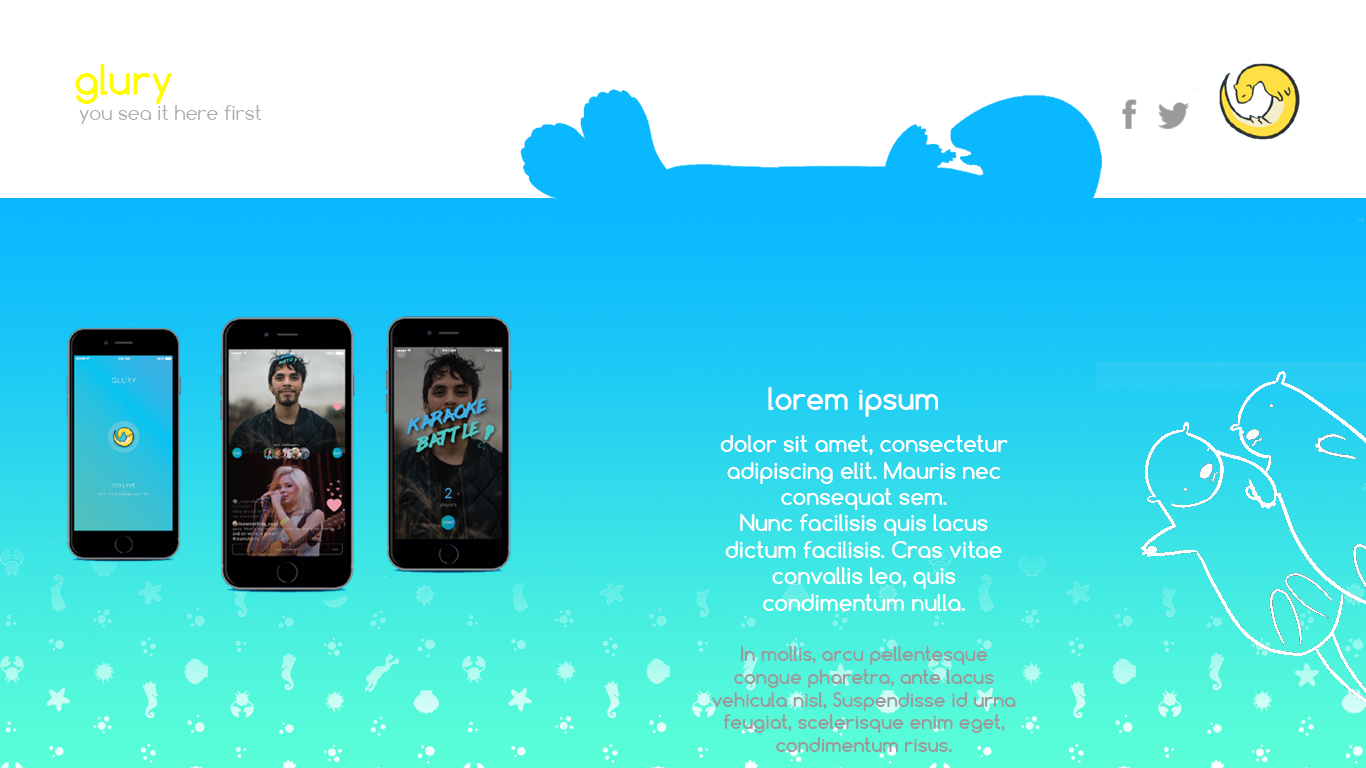
<style>
.page{position:relative;width:1366px;height:768px;background:#ffffff}
.page>*{position:absolute;margin:0}
.t1{font:40px "Comfortaa-Bold";color:#fffc00}
.t2{font:19px "Comfortaa";color:#aeaeae}
.t3{font:29px "Comfortaa-Bold";color:#ffffff}
.t4{font:22px "Comfortaa-Bold";color:#ffffff}
.t5{font:19px "Comfortaa-Bold";color:#9a9a9a}
</style>
<div class="page">
<p class="t1" style="left:75px;top:64px;width:97px;height:40px">glury</p>
<p class="t2" style="left:79px;top:105px;width:183px;height:19px">you sea it here first</p>
<p class="t3" style="left:768px;top:387px;width:170px;height:30px">lorem ipsum</p>
<p class="t4" style="left:712px;top:435px;width:304px;height:317px;text-align:center">dolor sit amet, consectetur adipiscing elit. Mauris nec consequat sem. <br>Nunc facilisis quis lacus dictum facilisis. Cras vitae convallis leo, quis condimentum nulla. <br><br><span class="t5">In mollis, arcu pellentesque congue pharetra, ante lacus vehicula nisl, Suspendisse id urna feugiat, scelerisque enim eget, condimentum risus.</span></p>
</div>
